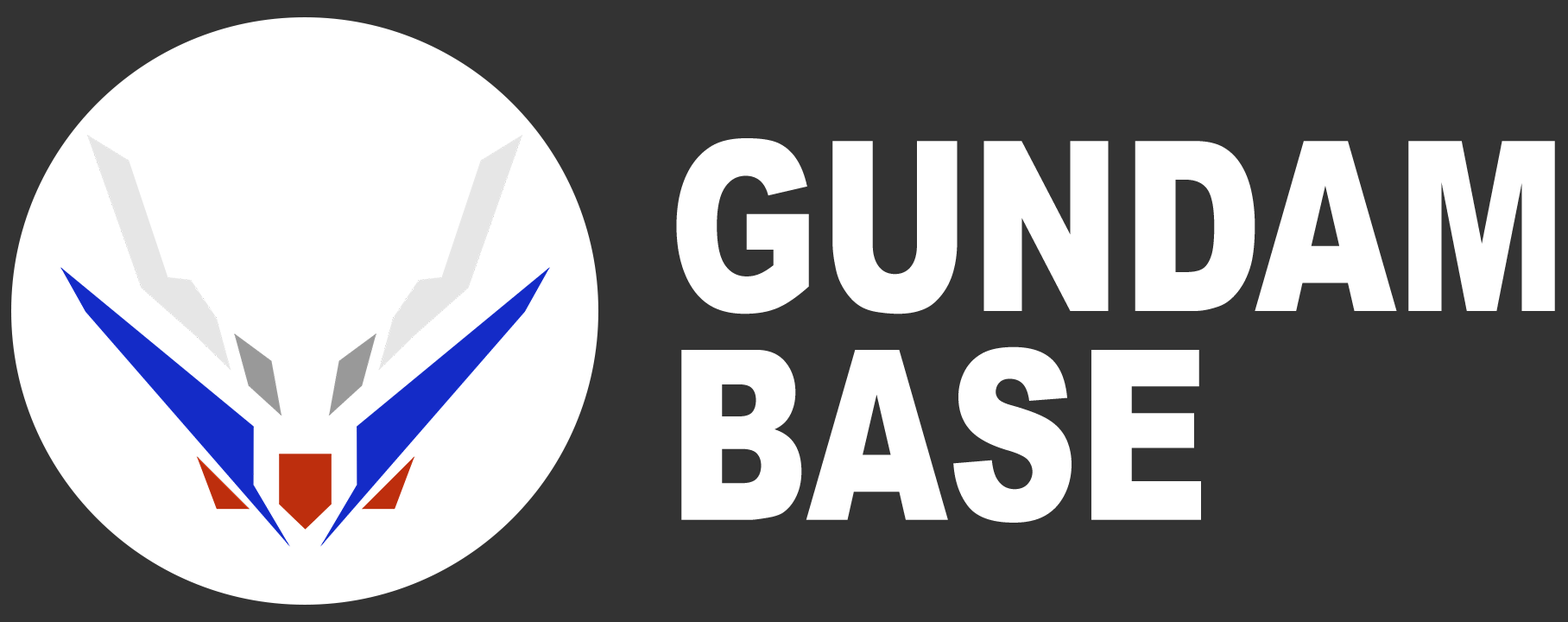
<style>
.page{position:relative;width:1568px;height:622px;background:#333333}
.page>*{position:absolute;margin:0}
.t1{font:236.9px/208.7px "Arial-Black";color:#ffffff;scale:0.77 1}
</style>
<div class="page">
<p class="t1" style="left:676px;top:138px;width:879px;height:384px">GUNDAM<br>BASE</p>
</div>
